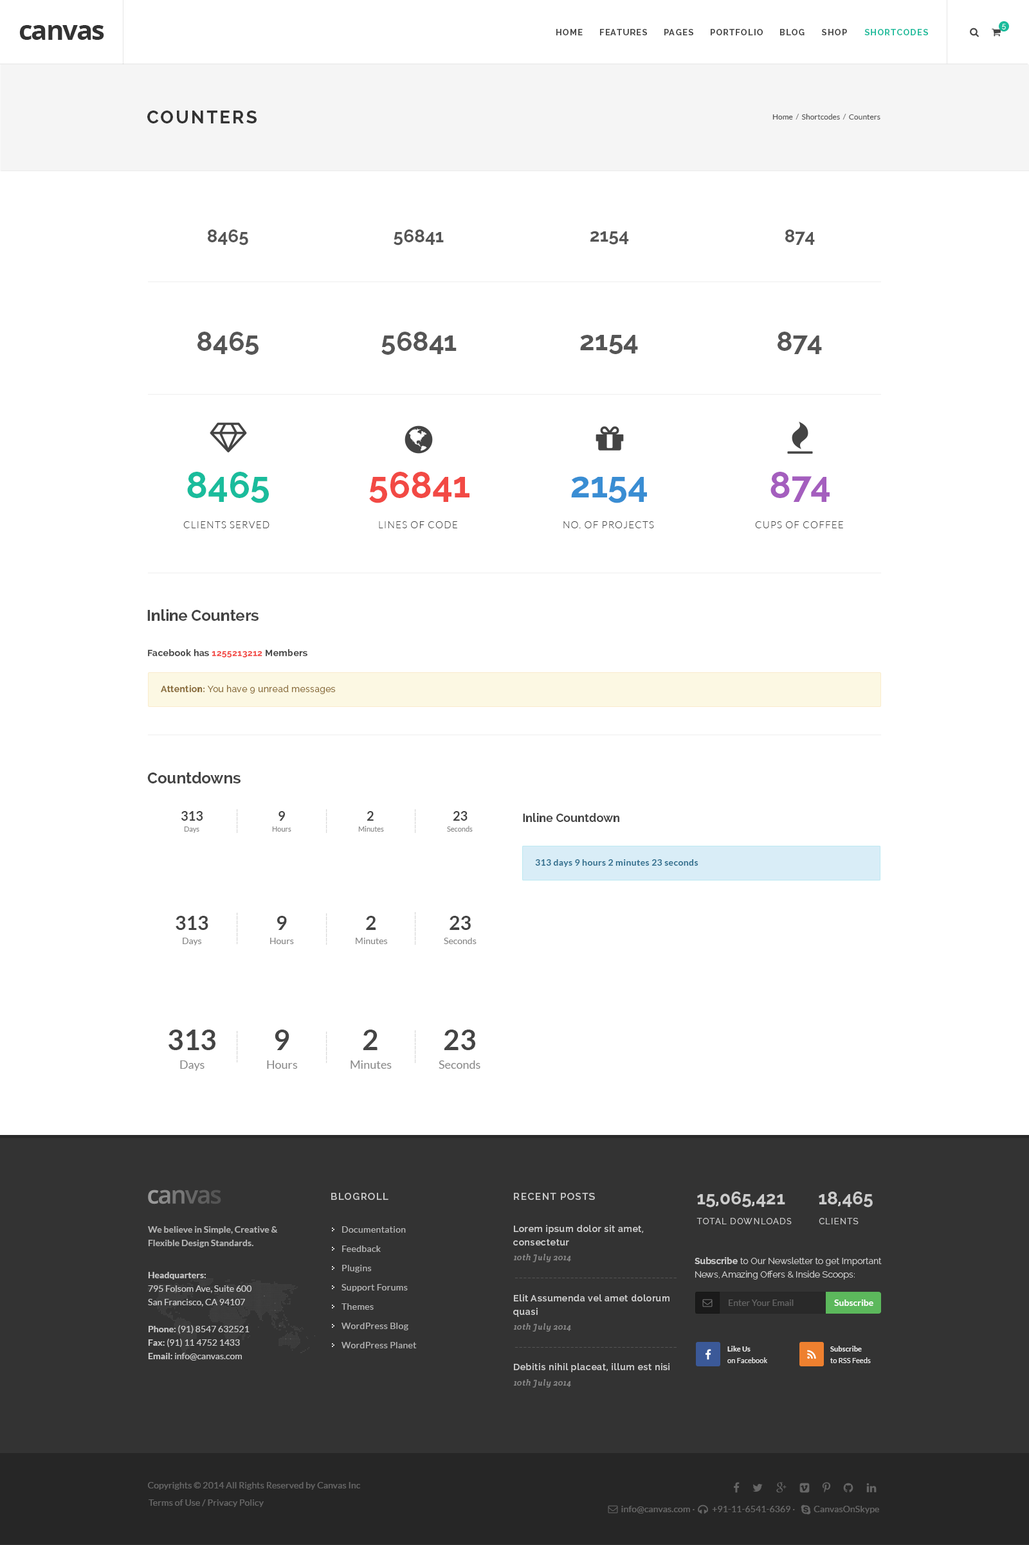
<style>
.page{position:relative;width:1029px;height:1545px;background:#ffffff}
.page>*{position:absolute;margin:0}
.t1{font:27px "OpenSans-Bold";letter-spacing:-0.05em;color:#333333}
.t2{font:8.4px "Raleway-Bold";letter-spacing:0.1em;color:#444444}
.t3{font:8.4px "Raleway-Bold";letter-spacing:0.1em;color:#1abc9c}
.t4{font:7.1px "Raleway-Light";letter-spacing:0.1em;color:#ffffff}
.t5{font:18px "Raleway-Bold";letter-spacing:0.1em;color:#333333;text-transform:uppercase}
.t6{font:7.7px "Lato-Regular";color:#555555}
.t7{font:7.7px "Lato-Regular";color:#777777}
.t8{font:18px "Raleway-Bold";color:#555555}
.t9{font:27px "Raleway-Bold";color:#555555}
.t10{font:36px "Raleway-Bold";color:#1abc9c}
.t11{font:36px "Raleway-Bold";color:#f24944}
.t12{font:36px "Raleway-Bold";color:#a45ebe}
.t13{font:36px "Raleway-Bold";color:#398dd3}
.t14{font:9.6px "Lato-Light";letter-spacing:0.08em;color:#444444}
.t15{font:15.4px "Raleway-Bold";color:#444444}
.t16{font:9px "Raleway-Bold";letter-spacing:0.025em;color:#444444}
.t17{font:9px "Raleway-Bold";letter-spacing:0.025em;color:#f24944}
.t18{font:9px "Raleway-Regular";letter-spacing:0.025em;color:#8a6d3b}
.t19{font:9px "Raleway-Bold";letter-spacing:0.025em;color:#8a6d3b}
.t20{font:6.8px "Lato-Regular";color:#c6c6c6;scale:1.05 1}
.t21{font:12.9px "Lato-Bold";color:#444444}
.t22{font:11.6px "Raleway-Bold";color:#444444}
.t23{font:7.1px "Lato-Regular";color:#888888}
.t24{font:9px "Lato-Bold";letter-spacing:0.025em;color:#31708f}
.t25{font:19.3px "Lato-Bold";color:#444444}
.t26{font:9px "Lato-Regular";color:#888888}
.t27{font:28.3px "Lato-Bold";color:#444444}
.t28{font:11.6px "Lato-Regular";color:#888888}
.t29{font:9.6px "Raleway-SemiBold";letter-spacing:0.1em;color:#cccccc}
.t30{font:18px "Raleway-Bold";color:#cccccc}
.t31{font:9px/13.5px "Lato-Bold";color:#cccccc}
.t32{font:9px/19.3px "Lato-Regular";letter-spacing:0.025em;color:#cccccc}
.t33{font:9px/13.5px "Raleway-SemiBold";letter-spacing:0.05em;color:#cccccc}
.t34{font:8.4px "Raleway-Regular";letter-spacing:0.1em;color:#cacaca;text-transform:uppercase}
.t35{font:8.4px "CreteRound-Italic";letter-spacing:0.05em;color:#888888}
.t36{font:9px/13.5px "Raleway-Light";color:#cccccc}
.t37{font:9px/13.5px "Raleway-Bold";color:#cccccc}
.t38{font:9px/13.5px "Lato-Regular";color:#cccccc}
.t39{font:11.6px "Lato-Italic";letter-spacing:0.05em;color:#545454}
.t40{font:9px "Lato-Regular";color:#777777}
.t41{font:9px "Lato-Bold";color:#ffffff}
.t42{font:7.1px/11.6px "Lato-Regular";letter-spacing:0.01em;color:#eeeeee}
.t43{font:7.1px/11.6px "Lato-Bold";letter-spacing:0.01em;color:#eeeeee}
.t44{font:9px "Raleway-SemiBold";letter-spacing:0.05em;color:#cccccc}
.t45{font:9px "Lato-Regular";letter-spacing:0.01em;color:#666666}
</style>
<div class="page">
<p class="t1" style="left:19px;top:25px;width:85px;height:15px">canvas</p>
<p class="t2" style="left:556px;top:29px;width:26px;height:6px">HOME</p>
<p class="t2" style="left:600px;top:29px;width:47px;height:6px">FEATURES</p>
<p class="t2" style="left:664px;top:29px;width:29px;height:6px">PAGES</p>
<p class="t2" style="left:710px;top:29px;width:52px;height:6px">PORTFOLIO</p>
<p class="t2" style="left:780px;top:29px;width:24px;height:6px">BLOG</p>
<p class="t2" style="left:822px;top:29px;width:25px;height:6px">SHOP</p>
<p class="t3" style="left:864px;top:29px;width:64px;height:6px">SHORTCODES</p>
<p class="t4" style="left:1002px;top:24px;width:3px;height:6px">5</p>
<p class="t5" style="left:147px;top:111px;width:109px;height:12px">Counters</p>
<p class="t6" style="left:772px;top:114px;width:108px;height:6px">Home  <span class="t7">/ </span> Shortcodes  <span class="t7">/ </span> Counters</p>
<p class="t8" style="left:208px;top:230px;width:40px;height:16px">8465</p>
<p class="t8" style="left:393px;top:230px;width:51px;height:16px">56841</p>
<p class="t8" style="left:590px;top:231px;width:39px;height:14px">2154</p>
<p class="t8" style="left:785px;top:230px;width:30px;height:15px">874</p>
<p class="t9" style="left:197px;top:332px;width:61px;height:23px">8465</p>
<p class="t9" style="left:381px;top:332px;width:75px;height:23px">56841</p>
<p class="t9" style="left:580px;top:335px;width:58px;height:19px">2154</p>
<p class="t9" style="left:777px;top:332px;width:45px;height:22px">874</p>
<p class="t10" style="left:187px;top:472px;width:82px;height:31px">8465</p>
<p class="t11" style="left:369px;top:472px;width:100px;height:31px">56841</p>
<p class="t12" style="left:770px;top:472px;width:59px;height:30px">874</p>
<p class="t13" style="left:571px;top:476px;width:76px;height:27px">2154</p>
<p class="t14" style="left:183px;top:521px;width:86px;height:7px">CLIENTS SERVED</p>
<p class="t14" style="left:379px;top:521px;width:78px;height:7px">LINES OF CODE</p>
<p class="t14" style="left:563px;top:521px;width:91px;height:7px">NO. OF PROJECTS</p>
<p class="t14" style="left:755px;top:521px;width:88px;height:7px">CUPS OF COFFEE</p>
<p class="t15" style="left:147px;top:609px;width:111px;height:12px">Inline Counters</p>
<p class="t16" style="left:148px;top:649px;width:159px;height:9px">Facebook has <span class="t17">1255213212</span> Members</p>
<p class="t18" style="left:161px;top:685px;width:175px;height:9px"><span class="t19">Attention: </span>You have 9 unread messages</p>
<p class="t15" style="left:147px;top:772px;width:93px;height:12px">Countdowns</p>
<p class="t20" style="left:236px;top:809px;width:2px;height:24px;rotate:90deg">................</p>
<p class="t20" style="left:325px;top:809px;width:2px;height:24px;rotate:90deg">................</p>
<p class="t20" style="left:414px;top:809px;width:2px;height:24px;rotate:90deg">................</p>
<p class="t21" style="left:181px;top:811px;width:22px;height:10px">313</p>
<p class="t21" style="left:278px;top:811px;width:7px;height:10px">9</p>
<p class="t21" style="left:366px;top:811px;width:8px;height:10px">2</p>
<p class="t21" style="left:453px;top:811px;width:14px;height:10px">23</p>
<p class="t22" style="left:523px;top:813px;width:96px;height:9px">Inline Countdown</p>
<p class="t23" style="left:184px;top:827px;width:15px;height:6px">Days</p>
<p class="t23" style="left:272px;top:827px;width:19px;height:5px">Hours</p>
<p class="t23" style="left:358px;top:826px;width:26px;height:6px">Minutes</p>
<p class="t23" style="left:447px;top:826px;width:26px;height:6px">Seconds</p>
<p class="t24" style="left:535px;top:860px;width:163px;height:7px">313 days 9 hours 2 minutes 23 seconds</p>
<p class="t25" style="left:176px;top:916px;width:32px;height:14px">313</p>
<p class="t20" style="left:236px;top:913px;width:2px;height:31px;rotate:90deg">.....................</p>
<p class="t25" style="left:277px;top:916px;width:10px;height:14px">9</p>
<p class="t20" style="left:325px;top:914px;width:2px;height:31px;rotate:90deg">.....................</p>
<p class="t25" style="left:366px;top:916px;width:10px;height:14px">2</p>
<p class="t20" style="left:414px;top:912px;width:2px;height:33px;rotate:90deg">......................</p>
<p class="t25" style="left:449px;top:916px;width:22px;height:14px">23</p>
<p class="t26" style="left:183px;top:938px;width:19px;height:8px">Days</p>
<p class="t26" style="left:270px;top:938px;width:24px;height:6px">Hours</p>
<p class="t26" style="left:356px;top:938px;width:32px;height:6px">Minutes</p>
<p class="t26" style="left:444px;top:938px;width:32px;height:6px">Seconds</p>
<p class="t27" style="left:168px;top:1030px;width:47px;height:20px">313</p>
<p class="t20" style="left:236px;top:1031px;width:2px;height:32px;rotate:90deg">.....................</p>
<p class="t27" style="left:274px;top:1030px;width:15px;height:20px">9</p>
<p class="t20" style="left:325px;top:1032px;width:2px;height:31px;rotate:90deg">.....................</p>
<p class="t27" style="left:363px;top:1030px;width:14px;height:20px">2</p>
<p class="t20" style="left:414px;top:1030px;width:2px;height:33px;rotate:90deg">......................</p>
<p class="t27" style="left:444px;top:1030px;width:31px;height:20px">23</p>
<p class="t28" style="left:180px;top:1061px;width:24px;height:10px">Days</p>
<p class="t28" style="left:267px;top:1061px;width:31px;height:8px">Hours</p>
<p class="t28" style="left:350px;top:1061px;width:42px;height:8px">Minutes</p>
<p class="t28" style="left:438px;top:1061px;width:42px;height:8px">Seconds</p>
<p class="t29" style="left:331px;top:1193px;width:57px;height:7px">BLOGROLL</p>
<p class="t29" style="left:514px;top:1193px;width:81px;height:7px">RECENT POSTS</p>
<p class="t30" style="left:697px;top:1192px;width:88px;height:16px">15,065,421</p>
<p class="t30" style="left:818px;top:1192px;width:54px;height:16px">18,465</p>
<p class="t31" style="left:148px;top:1227px;width:130px;height:21px;opacity:0.8">We believe in Simple, Creative &amp;<br>Flexible Design Standards.</p>
<p class="t32" style="left:341px;top:1227px;width:76px;height:122px;opacity:0.8">Documentation<br>Feedback<br>Plugins<br>Support Forums<br>Themes<br>WordPress Blog<br>WordPress Planet</p>
<p class="t33" style="left:513px;top:1225px;width:130px;height:21px">Lorem ipsum dolor sit amet,<br>consectetur</p>
<p class="t34" style="left:696px;top:1218px;width:95px;height:7px">TOTAL Downloads</p>
<p class="t34" style="left:818px;top:1218px;width:40px;height:7px">CLIENTS</p>
<p class="t35" style="left:513px;top:1254px;width:58px;height:9px">10th July 2014</p>
<p class="t36" style="left:694px;top:1257px;width:187px;height:23px"><span class="t37">Subscribe</span> to Our Newsletter to get Important<br>News, Amazing Offers &amp; Inside Scoops:</p>
<p class="t38" style="left:148px;top:1272px;width:104px;height:89px"><span class="t31">Headquarters:<br></span>795 Folsom Ave, Suite 600<br>San Francisco, CA 94107<br><span class="t31"><br>Phone: </span>(91) 8547 632521<br><span class="t31">Fax: </span>(91) 11 4752 1433<br><span class="t31">Email: </span>info@canvas.com</p>
<p class="t39" style="left:514px;top:1278px;width:162px;height:1px">--------------------------------------</p>
<p class="t33" style="left:513px;top:1295px;width:156px;height:22px">Elit Assumenda vel amet dolorum<br>quasi</p>
<p class="t40" style="left:728px;top:1300px;width:65px;height:6px;opacity:0.7">Enter Your Email</p>
<p class="t41" style="left:834px;top:1300px;width:39px;height:6px">Subscribe</p>
<p class="t35" style="left:513px;top:1324px;width:58px;height:8px">10th July 2014</p>
<p class="t39" style="left:514px;top:1347px;width:162px;height:1px">--------------------------------------</p>
<p class="t42" style="left:727px;top:1346px;width:40px;height:18px"><span class="t43">Like Us<br></span>on Facebook</p>
<p class="t42" style="left:830px;top:1346px;width:40px;height:18px"><span class="t43">Subscribe<br></span>to RSS Feeds</p>
<p class="t44" style="left:514px;top:1364px;width:155px;height:8px">Debitis nihil placeat, illum est nisi</p>
<p class="t35" style="left:513px;top:1380px;width:58px;height:8px">10th July 2014</p>
<p class="t45" style="left:148px;top:1482px;width:212px;height:8px">Copyrights © 2014 All Rights Reserved by Canvas Inc</p>
<p class="t45" style="left:148px;top:1500px;width:116px;height:8px">Terms of Use / Privacy Policy</p>
<p class="t45" style="left:621px;top:1506px;width:258px;height:8px">info@canvas.com ·   +91-11-6541-6369 ·        CanvasOnSkype</p>
</div>
